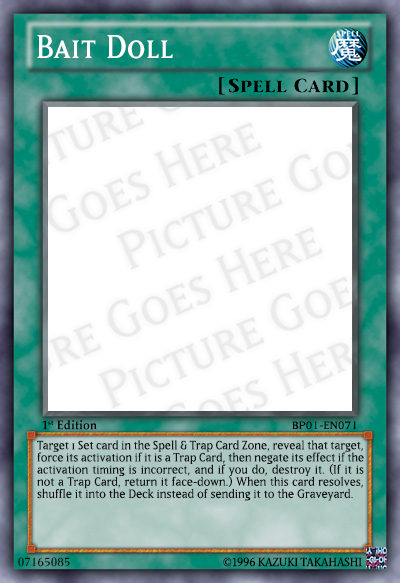
<style>
.page{position:relative;width:400px;height:583px;background:#ffffff}
.page>*{position:absolute;margin:0}
.t1{font:39.2px "MatrixRegularSmallCaps";letter-spacing:0.01em;color:#ffffff;scale:0.95 1}
.t2{font:12.7px "PalatinoLinotype-Bold";color:#010101;scale:0.94 1}
.t3{font:12.4px "MatrixBookSmallCaps";color:#010101;scale:1.16 1}
.t4{font:14.2px/12.2px "Matrix-Book";color:#12121b}
.t5{font:13.9px "MatrixRegularSmallCaps";letter-spacing:0.01em;color:#010101}
.t6{font:11.8px "StoneSerifITC-Medium";letter-spacing:-0.005em;color:#000000;scale:0.92 1}
</style>
<div class="page">
<p class="t1" style="left:37px;top:35px;width:136px;height:24px">Bait Doll</p>
<p class="t2" style="left:42px;top:420px;width:55px;height:10px">1st Edition</p>
<p class="t3" style="left:292px;top:421px;width:64px;height:9px">BP01-EN071</p>
<p class="t4" style="left:37px;top:440px;width:327px;height:61px;text-align:justify">Target 1 Set card in the Spell &amp; Trap Card Zone, reveal that target, force its activation if it is a Trap Card, then negate its effect if the activation timing is incorrect, and if you do, destroy it. (If it is not a Trap Card, return it face-down.) When this card resolves, shuffle it into the Deck instead of sending it to the Graveyard.</p>
<p class="t5" style="left:18px;top:557px;width:52px;height:10px">07165085</p>
<p class="t6" style="left:223px;top:557px;width:139px;height:10px">©1996 KAZUKI TAKAHASHI</p>
</div>
